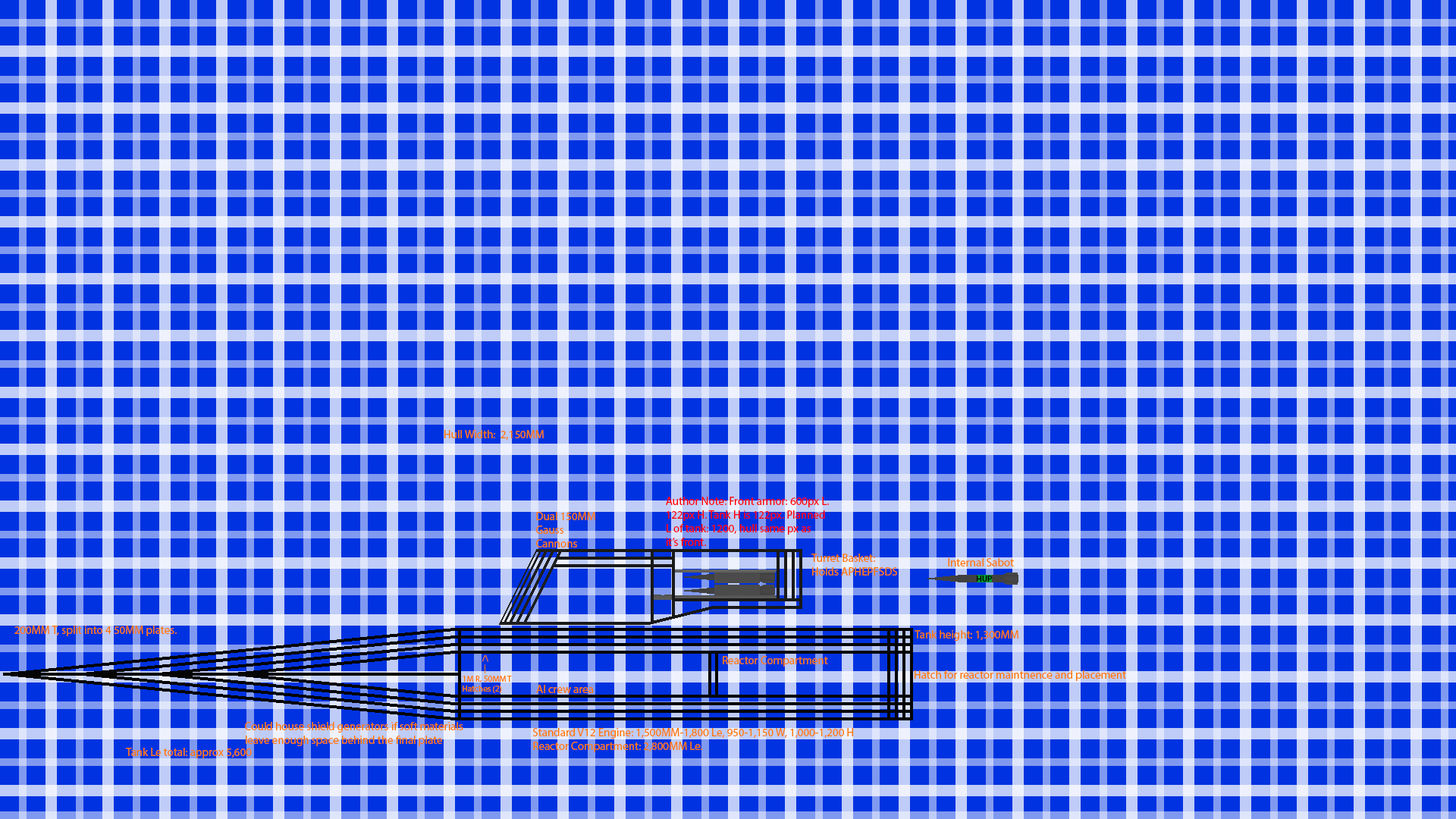
<style>
.page{position:relative;width:1456px;height:819px}
.page>*{position:absolute;margin:0}
.t1{font:11.4px "MyriadPro-Regular";color:#ff7800}
.t2{font:11.4px "MyriadPro-Regular";color:#ff0000}
.t3{font:8.5px "MyriadPro-Regular";color:#000000}
.t4{font:8.5px "MyriadPro-Regular";color:#ff7800}
</style>
<div class="page">
<p class="t1" style="left:444px;top:430px;width:100px;height:10px">Hull Width:  2,150MM</p>
<p class="t2" style="left:666px;top:497px;width:163px;height:49px">Author Note: Front armor: 600px L.<br>122px H. Tank H is 122px. Planned<br>L of tank: 1200, hull same px as<br>it’s front.</p>
<p class="t1" style="left:536px;top:512px;width:59px;height:36px">Dual 150MM<br>Gauss<br>Cannons</p>
<p class="t1" style="left:811px;top:554px;width:86px;height:22px">Turret Basket:<br>Holds APHEPFSDS</p>
<p class="t1" style="left:948px;top:558px;width:66px;height:8px">Internal Sabot</p>
<p class="t3" style="left:977px;top:576px;width:15px;height:6px">HUP</p>
<p class="t1" style="left:14px;top:626px;width:163px;height:10px">200MM T, split into 4 50MM plates.</p>
<p class="t1" style="left:915px;top:630px;width:103px;height:11px">Tank height: 1,300MM</p>
<p class="t4" style="left:463px;top:655px;width:49px;height:38px">/\<br>            |<br>1M R, 50MM T <br>Hatches (2)</p>
<p class="t1" style="left:723px;top:656px;width:105px;height:11px">Reactor Compartment</p>
<p class="t1" style="left:915px;top:670px;width:211px;height:11px">Hatch for reactor maintnence and placement</p>
<p class="t1" style="left:536px;top:685px;width:58px;height:8px">AI crew area</p>
<p class="t1" style="left:245px;top:722px;width:218px;height:24px">Could house shield generators if soft materials<br>leave enough space behind the final plate</p>
<p class="t1" style="left:532px;top:728px;width:321px;height:24px">Standard V12 Engine: 1,500MM-1,800 Le, 950-1,150 W, 1,000-1,200 H<br>Reactor Compartment: 2,800MM Le.</p>
<p class="t1" style="left:126px;top:748px;width:126px;height:10px">Tank Le total: approx 5,600</p>
</div>
